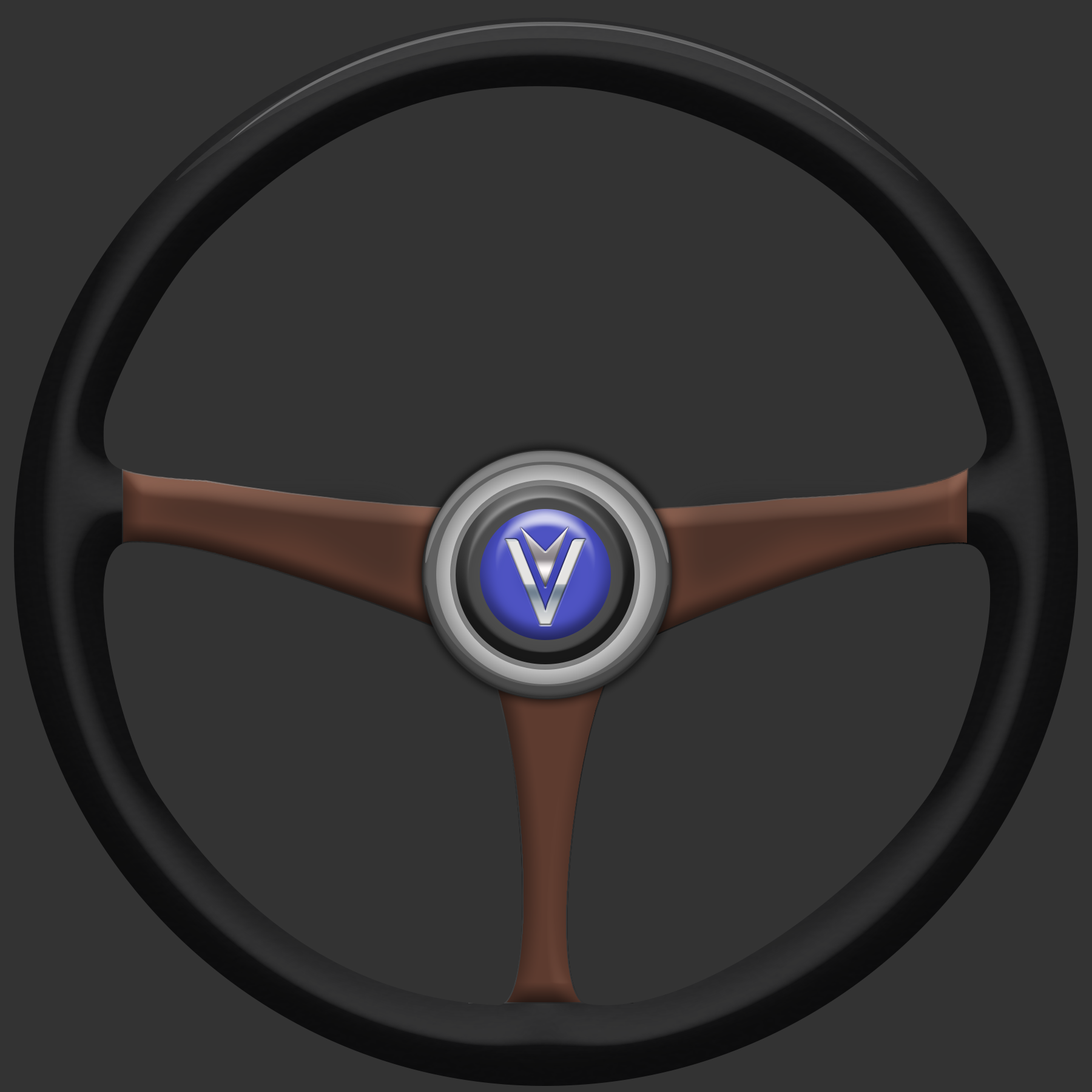
<style>
.page{position:relative;width:1092px;height:1092px;background:#333333}
.page>*{position:absolute;margin:0}
.t1{font:119.7px "Lato-Regular"}
</style>
<div class="page">
<p class="t1" style="left:505px;top:539px;width:80px;height:86px">V</p>
</div>
